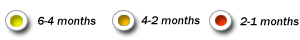
<style>
.page{position:relative;width:300px;height:40px;background:#ffffff}
.page>*{position:absolute;margin:0}
.t1{font:12px "FranklinGothic-MediumItalic";color:#000000}
</style>
<div class="page">
<p class="t1" style="left:38px;top:16px;width:58px;height:9px">6-4 months</p>
<p class="t1" style="left:141px;top:16px;width:59px;height:9px">4-2 months</p>
<p class="t1" style="left:240px;top:17px;width:59px;height:9px">2-1 months</p>
</div>
